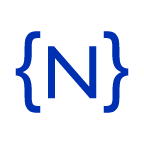
<style>
.page{position:relative;width:144px;height:144px;background:#ffffff}
.page>*{position:absolute;margin:0}
.t1{font:86.9px "GillSans";color:#0030b2}
.t2{font:76.2px "GillSans";color:#0030b2}
</style>
<div class="page">
<p class="t1" style="left:15px;top:31px;width:114px;height:82px">{<span class="t2">N</span>}</p>
</div>
